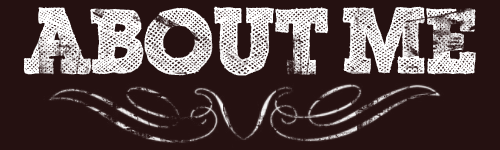
<style>
.page{position:relative;width:500px;height:150px;background:#251111}
.page>*{position:absolute;margin:0}
.t1{font:90px "ScribbleBoxDEMO";color:#ffffff}
</style>
<div class="page">
<p class="t1" style="left:23px;top:6px;width:453px;height:70px">About me</p>
</div>
